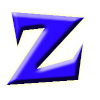
<style>
.page{position:relative;width:100px;height:100px;background:#ffffff}
.page>*{position:absolute;margin:0}
.t1{font:96px "SnapITC-Regular"}
</style>
<div class="page">
<p class="t1" style="left:6px;top:12px;width:79px;height:73px">Z</p>
</div>
